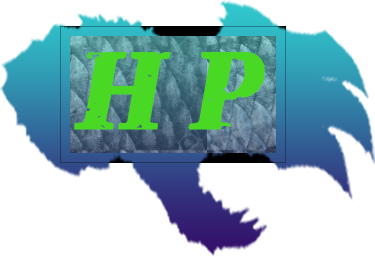
<style>
.page{position:relative;width:375px;height:257px;background:#ffffff}
.page>*{position:absolute;margin:0}
.t1{font:100px "Genkaimincho";letter-spacing:0.25em;color:#49d823;font-weight:bold;font-style:italic}
</style>
<div class="page">
<p class="t1" style="left:74px;top:52px;width:191px;height:78px">HP</p>
</div>
